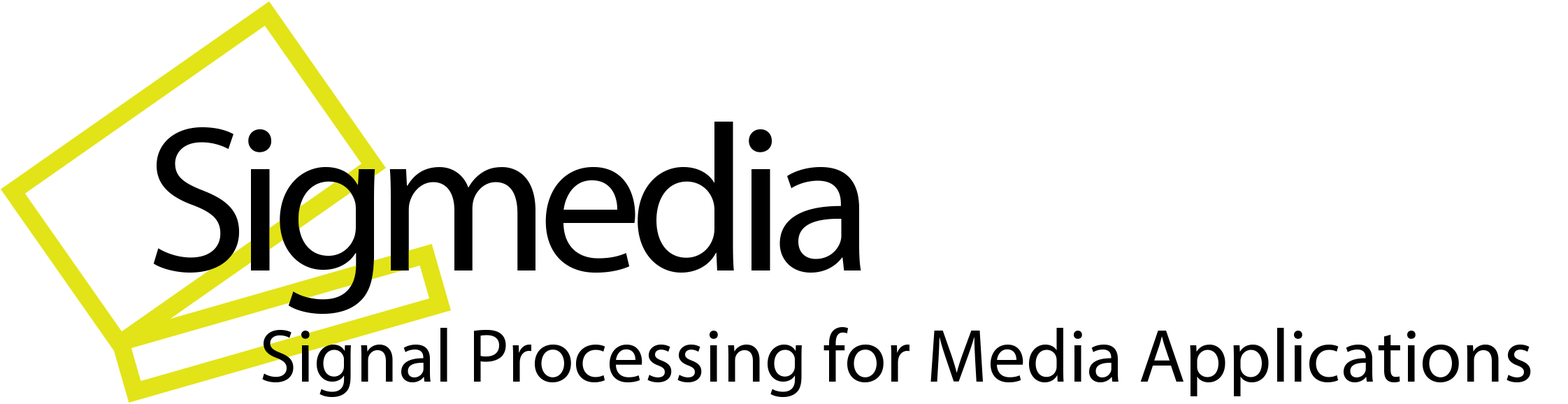
<style>
.page{position:relative;width:1568px;height:404px;background:#ffffff}
.page>*{position:absolute;margin:0}
.t1{font:209.7px "MyriadPro-Regular";letter-spacing:-0.06em;color:#000000}
.t2{font:75.7px "MyriadPro-Regular";color:#000000}
</style>
<div class="page">
<p class="t1" style="left:153px;top:122px;width:708px;height:192px">Sigmedia</p>
<p class="t2" style="left:262px;top:326px;width:1269px;height:71px">Signal Processing for Media Applications</p>
</div>
